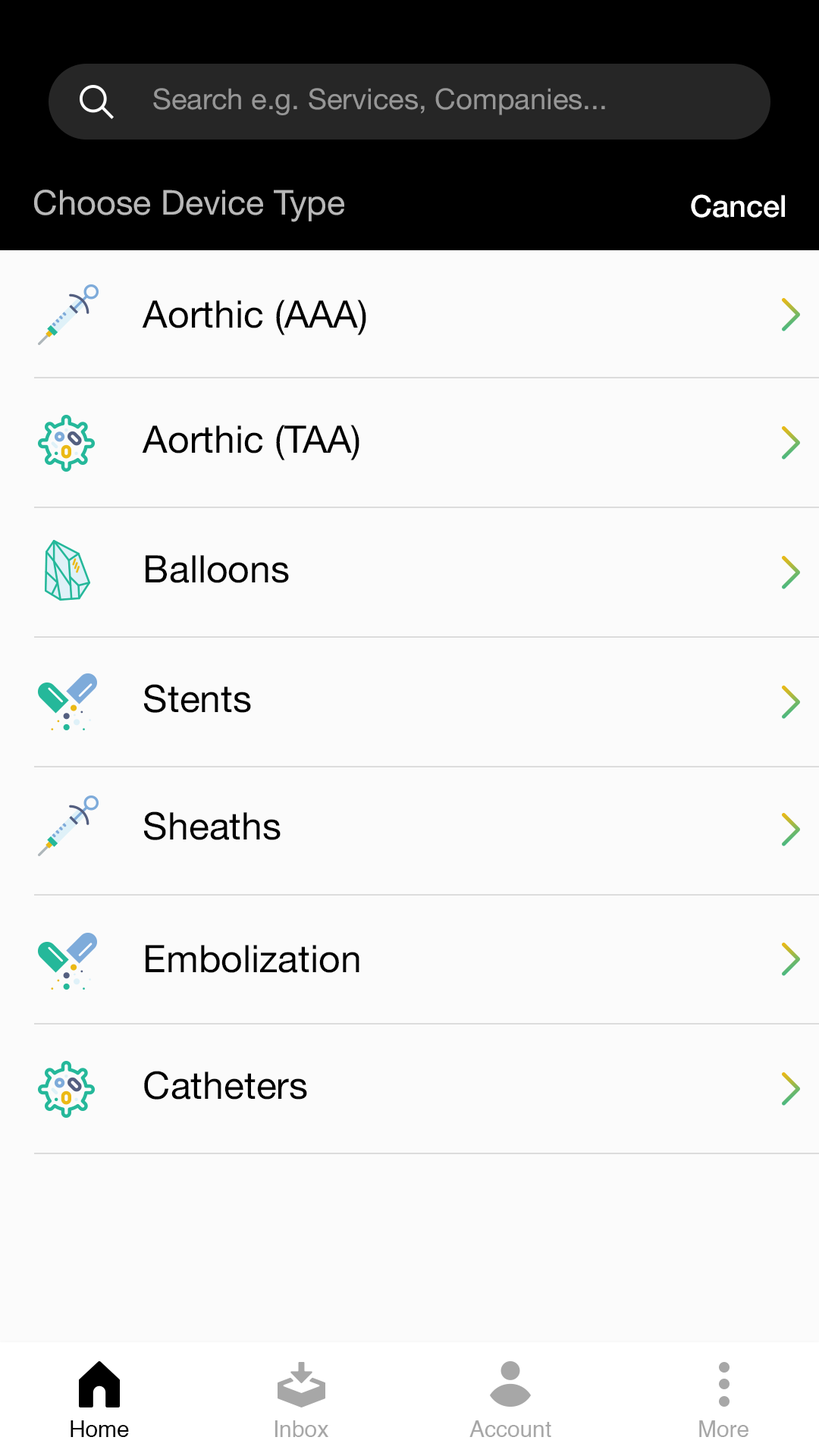
<style>
.page{position:relative;width:819px;height:1456px;background:#fbfbfb}
.page>*{position:absolute;margin:0}
.t1{font:28.8px "HelveticaNeue";color:#969696}
.t2{font:34.1px "HelveticaNeue";color:#b8b8b8}
.t3{font:30.4px "HelveticaNeue-Medium";color:#ffffff}
.t4{font:37.9px "HelveticaNeue";color:#000000}
.t5{font:22.7px "Helvetica";color:#000000}
.t6{font:22.7px "Helvetica";color:#a7a7a7}
</style>
<div class="page">
<p class="t1" style="left:153px;top:88px;width:452px;height:27px">Search e.g. Services, Companies...</p>
<p class="t2" style="left:34px;top:190px;width:310px;height:32px">Choose Device Type</p>
<p class="t3" style="left:691px;top:194px;width:94px;height:24px">Cancel</p>
<p class="t4" style="left:142px;top:300px;width:224px;height:35px">Aorthic (AAA)</p>
<p class="t4" style="left:142px;top:425px;width:217px;height:35px">Aorthic (TAA)</p>
<p class="t4" style="left:146px;top:555px;width:143px;height:28px">Balloons</p>
<p class="t4" style="left:143px;top:684px;width:108px;height:29px">Stents</p>
<p class="t4" style="left:143px;top:811px;width:138px;height:29px">Sheaths</p>
<p class="t4" style="left:146px;top:945px;width:213px;height:28px">Embolization</p>
<p class="t4" style="left:144px;top:1071px;width:163px;height:29px">Catheters</p>
<p class="t5" style="left:71px;top:1420px;width:58px;height:17px">Home</p>
<p class="t6" style="left:275px;top:1420px;width:53px;height:17px">Inbox</p>
<p class="t6" style="left:469px;top:1420px;width:82px;height:17px">Account</p>
<p class="t6" style="left:699px;top:1420px;width:49px;height:17px">More</p>
</div>
